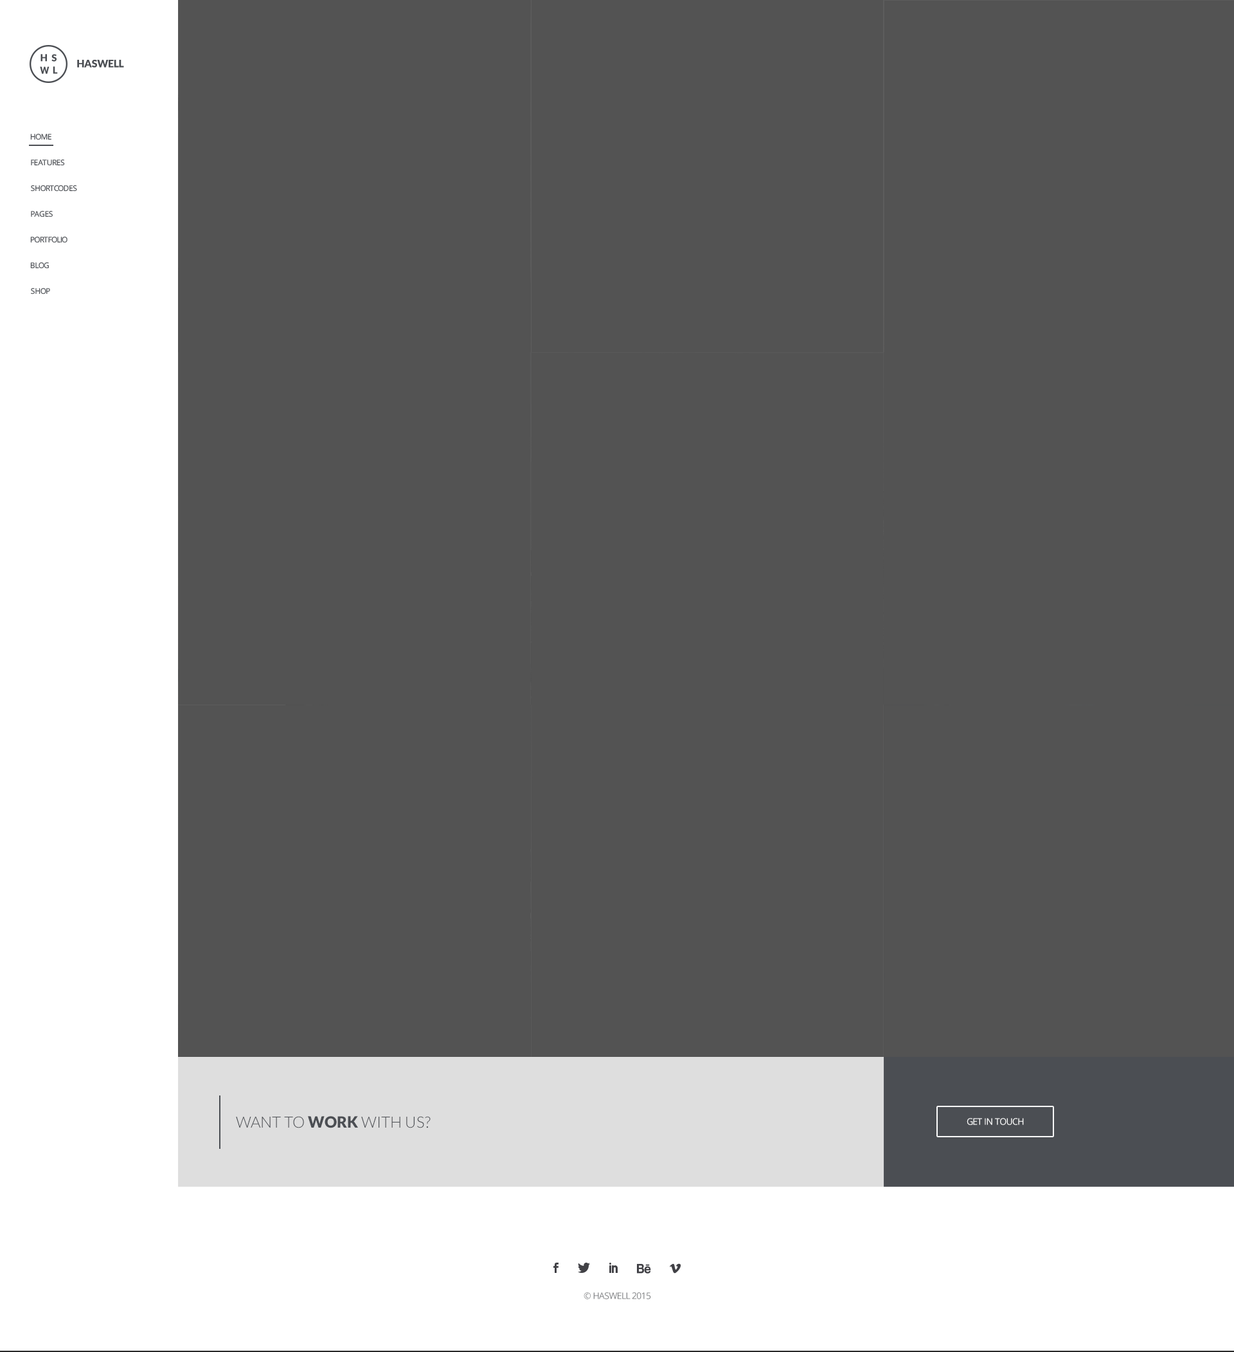
<style>
.page{position:relative;width:1234px;height:1352px;background:#535353}
.page>*{position:absolute;margin:0}
.t1{font:9.6px "Lato-Black";letter-spacing:-0.02em;color:#4b4e53}
.t2{font:10.3px "Lato-Black";letter-spacing:-0.02em;color:#4b4e53}
.t3{font:9.6px "Lato-Black";letter-spacing:-0.02em;color:#4b4e53;scale:0.89 1}
.t4{font:7.7px "OpenSans";letter-spacing:-0.05em;color:#4b4e53;text-transform:uppercase}
.t5{font:15.4px "Lato-Light";color:#4b4e53;text-transform:uppercase}
.t6{font:15.4px "Lato-Black";color:#4b4e53;text-transform:uppercase}
.t7{font:9px "OpenSans";letter-spacing:-0.05em;color:#ffffff;text-transform:uppercase}
.t8{font:9px "OpenSans";letter-spacing:-0.05em;color:#7e8082;text-transform:uppercase}
</style>
<div class="page">
<p class="t1" style="left:40px;top:54px;width:7px;height:8px">H</p>
<p class="t1" style="left:51px;top:54px;width:6px;height:8px">S</p>
<p class="t2" style="left:77px;top:60px;width:47px;height:8px">HASWELL</p>
<p class="t3" style="left:40px;top:66px;width:10px;height:8px">W</p>
<p class="t1" style="left:53px;top:66px;width:5px;height:8px">L</p>
<p class="t4" style="left:30px;top:134px;width:21px;height:6px">Home</p>
<p class="t4" style="left:31px;top:159px;width:34px;height:7px">FeAtures</p>
<p class="t4" style="left:31px;top:185px;width:46px;height:7px">Shortcodes</p>
<p class="t4" style="left:31px;top:211px;width:22px;height:6px">Pages</p>
<p class="t4" style="left:30px;top:237px;width:38px;height:6px">Portfolio</p>
<p class="t4" style="left:30px;top:262px;width:19px;height:7px">Blog</p>
<p class="t4" style="left:31px;top:288px;width:19px;height:6px">Shop</p>
<p class="t5" style="left:236px;top:1116px;width:195px;height:12px">Want to <span class="t6">work</span> with us?</p>
<p class="t7" style="left:967px;top:1118px;width:57px;height:7px">GET IN TOUCH</p>
<p class="t8" style="left:584px;top:1292px;width:67px;height:7px">© Haswell 2015</p>
</div>
